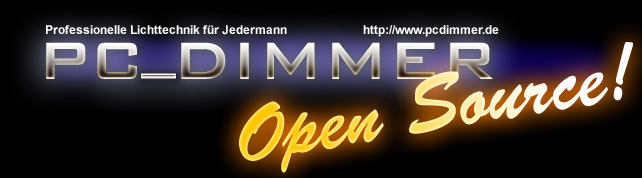
<style>
.page{position:relative;width:642px;height:178px;background:#000000}
.page>*{position:absolute;margin:0}
.t1{font:12px "Arial-BoldMT";color:#ffffff}
.t2{font:70px "BankGothicBT-Medium"}
.t3{font:80.4px "BrushScriptStd";scale:0.94 1}
</style>
<div class="page">
<p class="t1" style="left:46px;top:25px;width:241px;height:10px">Professionelle Lichttechnik für Jedermann</p>
<p class="t1" style="left:363px;top:25px;width:136px;height:12px">http://www.pcdimmer.de</p>
<p class="t2" style="left:46px;top:42px;width:447px;height:37px">PC DIMMER</p>
<p class="t3" style="left:239px;top:42px;width:394px;height:131px;rotate:-9deg">Open Source!</p>
<p class="t2" style="left:141px;top:73px;width:35px;height:6px">_</p>
</div>
